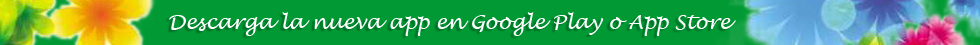
<style>
.page{position:relative;width:980px;height:45px;background:#009933}
.page>*{position:absolute;margin:0}
.t1{font:20px "LucidaHandwriting-Italic";color:#ffffff}
</style>
<div class="page">
<p class="t1" style="left:169px;top:12px;width:567px;height:24px">Descarga la nueva app en Google Play o App Store</p>
</div>
